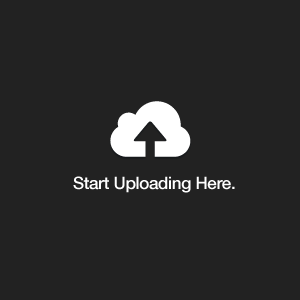
<style>
.page{position:relative;width:300px;height:300px;background:#222222}
.page>*{position:absolute;margin:0}
.t1{font:96px "Pictos";letter-spacing:-0.02em;color:#ffffff}
.t2{font:17px "HelveticaNeue-Medium";letter-spacing:-0.02em;color:#ffffff}
</style>
<div class="page">
<p class="t1" style="left:110px;top:101px;width:81px;height:56px">c</p>
<p class="t2" style="left:73px;top:176px;width:162px;height:17px">Start Uploading Here.</p>
</div>
